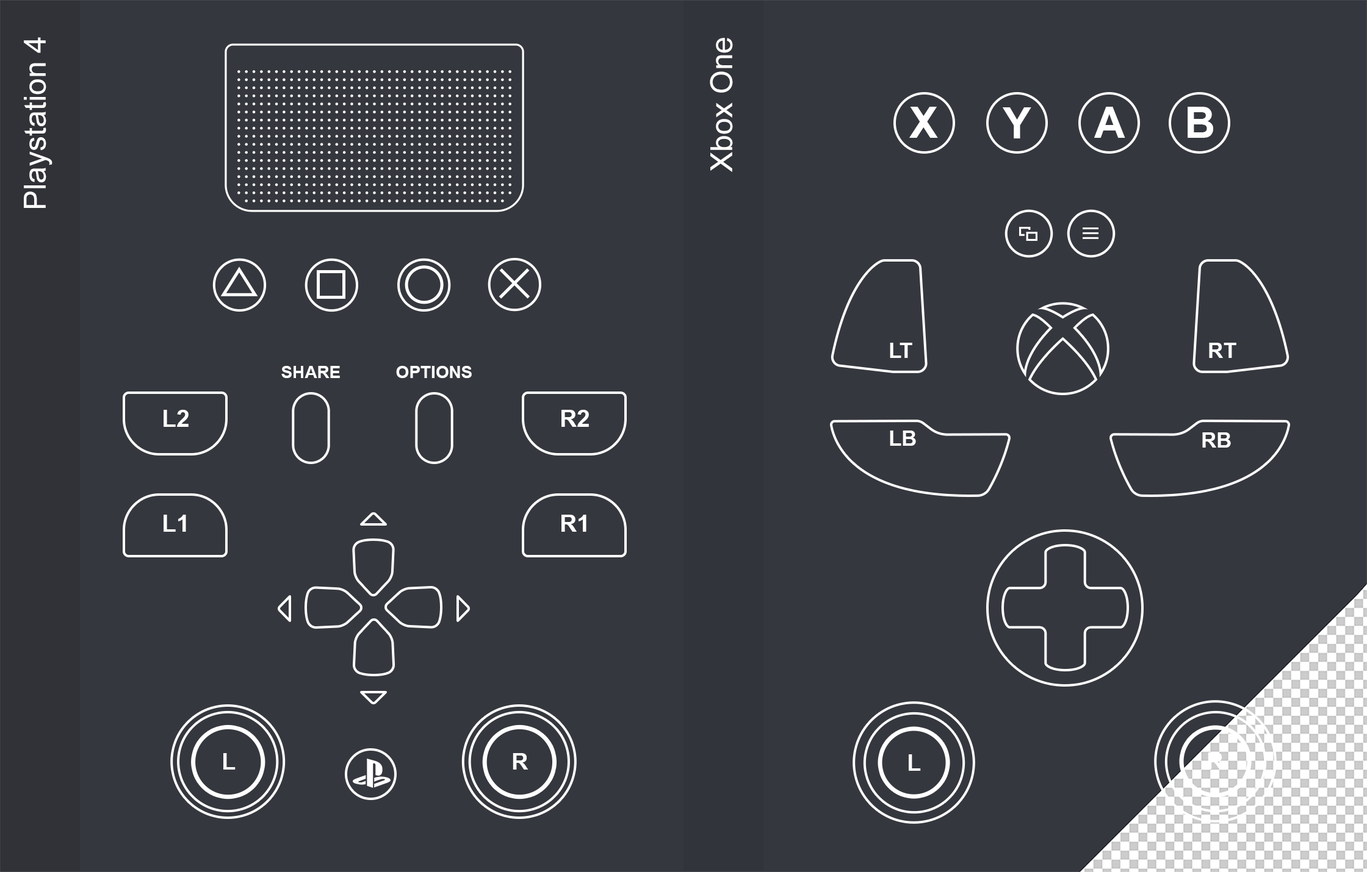
<style>
.page{position:relative;width:1367px;height:872px;background:#35373e}
.page>*{position:absolute;margin:0}
.t1{font:30.5px "ArialMT";color:#ffffff}
.t2{font:43.6px "Arial-BoldMT";color:#ffffff}
.t3{font:21.4px "Arial-BoldMT";color:#ffffff}
.t4{font:17.1px "Arial-BoldMT";color:#ffffff}
.t5{font:23.6px "Arial-BoldMT";color:#ffffff}
.t6{font:23.2px "Arial-BoldMT";color:#ffffff}
</style>
<div class="page">
<p class="t1" style="left:24px;top:37px;width:28px;height:171px;rotate:-90deg">Playstation 4</p>
<p class="t1" style="left:710px;top:38px;width:23px;height:134px;rotate:-90deg">Xbox One</p>
<p class="t2" style="left:909px;top:107px;width:29px;height:31px">X</p>
<p class="t2" style="left:1002px;top:107px;width:29px;height:32px">Y</p>
<p class="t2" style="left:1094px;top:107px;width:31px;height:31px">A</p>
<p class="t2" style="left:1187px;top:107px;width:26px;height:31px">B</p>
<p class="t3" style="left:890px;top:343px;width:22px;height:15px">LT</p>
<p class="t3" style="left:1209px;top:343px;width:27px;height:15px">RT</p>
<p class="t4" style="left:281px;top:366px;width:59px;height:12px">SHARE</p>
<p class="t4" style="left:396px;top:366px;width:76px;height:12px">OPTIONS</p>
<p class="t5" style="left:164px;top:410px;width:25px;height:17px">L2</p>
<p class="t5" style="left:561px;top:410px;width:28px;height:17px">R2</p>
<p class="t3" style="left:890px;top:431px;width:26px;height:15px">LB</p>
<p class="t3" style="left:1202px;top:433px;width:29px;height:15px">RB</p>
<p class="t5" style="left:164px;top:515px;width:22px;height:17px">L1</p>
<p class="t5" style="left:561px;top:515px;width:25px;height:17px">R1</p>
<p class="t6" style="left:223px;top:754px;width:13px;height:16px">L</p>
<p class="t6" style="left:513px;top:754px;width:15px;height:16px">R</p>
<p class="t6" style="left:908px;top:755px;width:13px;height:16px">L</p>
<p class="t6" style="left:1207px;top:753px;width:16px;height:16px">R</p>
</div>
